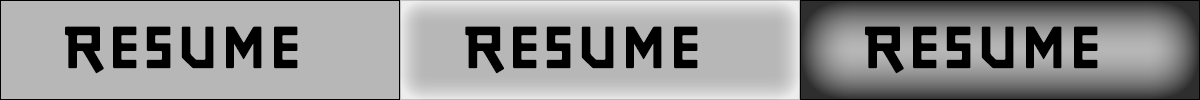
<style>
.page{position:relative;width:1200px;height:100px;background:#b7b7b7}
.page>*{position:absolute;margin:0}
.t1{font:60px "JourneyPS3-Regular";color:#000000}
</style>
<div class="page">
<p class="t1" style="left:65px;top:26px;width:233px;height:48px">resume</p>
<p class="t1" style="left:465px;top:26px;width:233px;height:48px">resume</p>
<p class="t1" style="left:865px;top:26px;width:233px;height:48px">resume</p>
</div>
